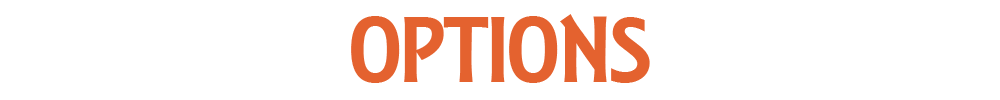
<style>
.page{position:relative;width:1000px;height:100px;background:#ffffff}
.page>*{position:absolute;margin:0}
.t1{font:100px "ARESSENCE";color:#e4622f}
</style>
<div class="page">
<p class="t1" style="left:351px;top:14px;width:299px;height:69px">OPTIONS</p>
</div>
